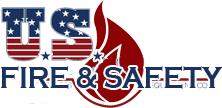
<style>
.page{position:relative;width:222px;height:108px;background:#ffffff}
.page>*{position:absolute;margin:0}
.t1{font:31.8px "CopperplateGothic-Bold";color:#1b325e;text-transform:uppercase;scale:0.84 1}
</style>
<div class="page">
<p class="t1" style="left:1px;top:66px;width:222px;height:23px">Fire &amp; Safety</p>
</div>
